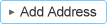
<style>
.page{position:relative;width:107px;height:24px;background:#ffffff}
.page>*{position:absolute;margin:0}
.t1{font:14px "ArialMT";letter-spacing:-0.025em;color:#333333}
</style>
<div class="page">
<p class="t1" style="left:20px;top:6px;width:77px;height:11px">Add Address</p>
</div>
